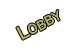
<style>
.page{position:relative;width:80px;height:50px;background:#ffffff}
.page>*{position:absolute;margin:0}
.t1{font:18px "Verdana";color:#b5b05c;font-variant:small-caps;font-weight:bold}
</style>
<div class="page">
<p class="t1" style="left:16px;top:10px;width:44px;height:30px;rotate:-28deg">Lobby</p>
</div>
